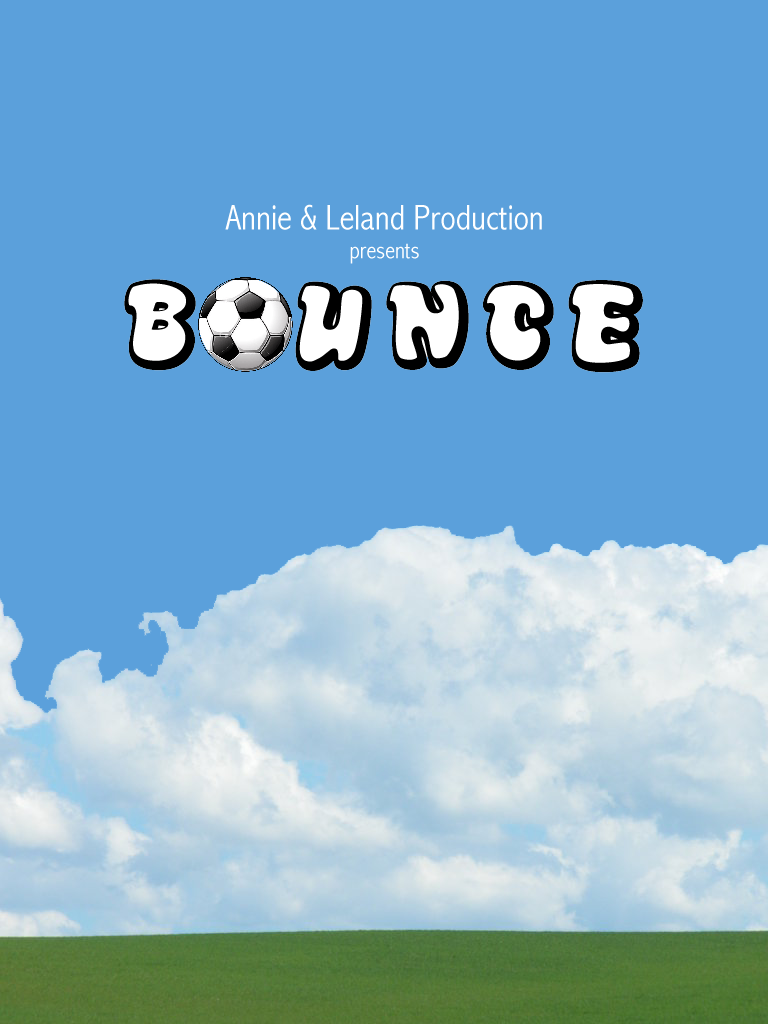
<style>
.page{position:relative;width:768px;height:1024px;background:#5ba0db}
.page>*{position:absolute;margin:0}
.t1{font:36px "AbadiMT-CondensedLight";color:#ffffff}
.t2{font:24px "AbadiMT-CondensedLight";color:#ffffff}
</style>
<div class="page">
<p class="t1" style="left:225px;top:204px;width:317px;height:60px;text-align:center">Annie &amp; Leland Production<br><span class="t2">presents</span></p>
</div>
